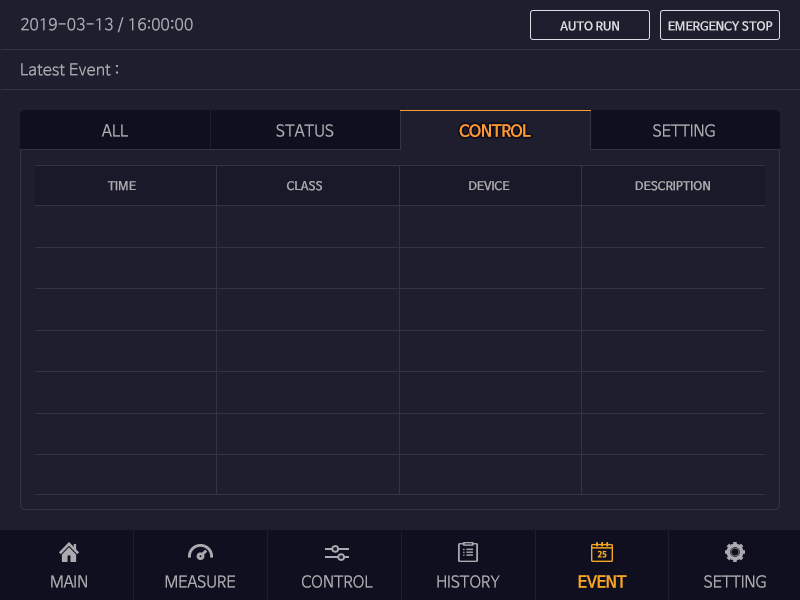
<style>
.page{position:relative;width:800px;height:600px;background:#1e1e2f}
.page>*{position:absolute;margin:0}
.t1{font:16px "NanumBarunGothic";color:#aaaaaf}
.t2{font:12px "NanumBarunGothicBold";color:#dcdce1}
.t3{font:16px "NanumBarunGothic";letter-spacing:-0.025em;color:#aaaaaf}
.t4{font:16px "NanumBarunGothicBold";letter-spacing:-0.025em;color:#ff9933}
.t5{font:12px "NanumBarunGothicBold";color:#aaaaaf}
.t6{font:16px "NanumBarunGothicBold";letter-spacing:-0.025em;color:#f5a623}
</style>
<div class="page">
<p class="t1" style="left:21px;top:17px;width:172px;height:16px">2019-03-13 / 16:00:00</p>
<p class="t2" style="left:560px;top:21px;width:59px;height:10px">AUTO RUN</p>
<p class="t2" style="left:668px;top:21px;width:105px;height:10px">EMERGENCY STOP</p>
<p class="t1" style="left:21px;top:63px;width:97px;height:13px">Latest Event :</p>
<p class="t3" style="left:101px;top:124px;width:27px;height:13px">ALL</p>
<p class="t3" style="left:276px;top:124px;width:58px;height:13px">STATUS</p>
<p class="t4" style="left:459px;top:124px;width:72px;height:13px">CONTROL</p>
<p class="t3" style="left:653px;top:124px;width:62px;height:13px">SETTING</p>
<p class="t5" style="left:107px;top:181px;width:29px;height:10px">TIME</p>
<p class="t5" style="left:287px;top:181px;width:35px;height:10px">CLASS</p>
<p class="t5" style="left:469px;top:181px;width:41px;height:10px">DEVICE</p>
<p class="t5" style="left:635px;top:181px;width:75px;height:10px">DESCRIPTION</p>
<p class="t3" style="left:51px;top:575px;width:36px;height:13px">MAIN</p>
<p class="t3" style="left:165px;top:575px;width:70px;height:13px">MEASURE</p>
<p class="t3" style="left:302px;top:575px;width:71px;height:13px">CONTROL</p>
<p class="t3" style="left:437px;top:575px;width:63px;height:13px">HISTORY</p>
<p class="t6" style="left:578px;top:575px;width:49px;height:13px">EVENT</p>
<p class="t3" style="left:704px;top:575px;width:62px;height:13px">SETTING</p>
</div>
